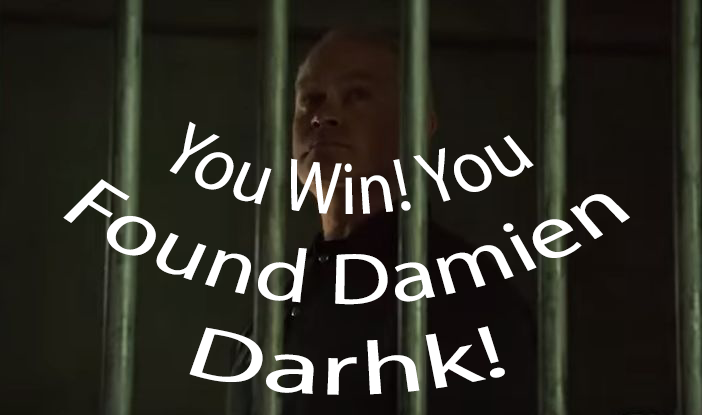
<style>
.page{position:relative;width:702px;height:415px}
.page>*{position:absolute;margin:0}
.t1{font:64.3px "MyriadPro-Regular";color:#ffffff}
</style>
<div class="page">
<p class="t1" style="left:63px;top:121px;width:567px;height:274px;text-align:center">You Win! You Found Damien Darhk!</p>
</div>
